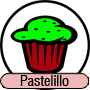
<style>
.page{position:relative;width:90px;height:90px;background:#ffffff}
.page>*{position:absolute;margin:0}
.t1{font:14.7px "Swiss721BT-RomanCondensed";color:#000000}
</style>
<div class="page">
<p class="t1" style="left:20px;top:75px;width:49px;height:11px">Pastelillo</p>
</div>
